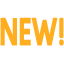
<style>
.page{position:relative;width:64px;height:64px;background:#ffffff}
.page>*{position:absolute;margin:0}
.t1{font:38.8px "AvocadoSansBold-Regular";color:#ffae20;font-weight:bold;scale:0.68 1}
</style>
<div class="page">
<p class="t1" style="left:0px;top:17px;width:64px;height:29px">NEW!</p>
</div>
